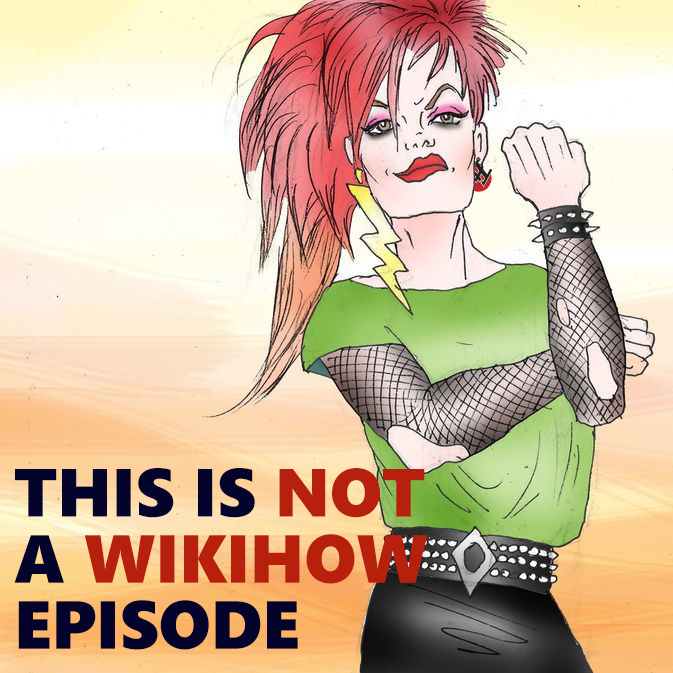
<style>
.page{position:relative;width:673px;height:673px}
.page>*{position:absolute;margin:0}
.t1{font:68px/66.2px "SegoeUIBlack";color:#04032b}
.t2{font:68px/66.2px "SegoeUIBlack";color:#b6200c}
</style>
<div class="page">
<p class="t1" style="left:14px;top:468px;width:414px;height:182px">THIS IS <span class="t2">NOT<br></span>A <span class="t2">WIKIHOW<br></span>EPISODE</p>
</div>
